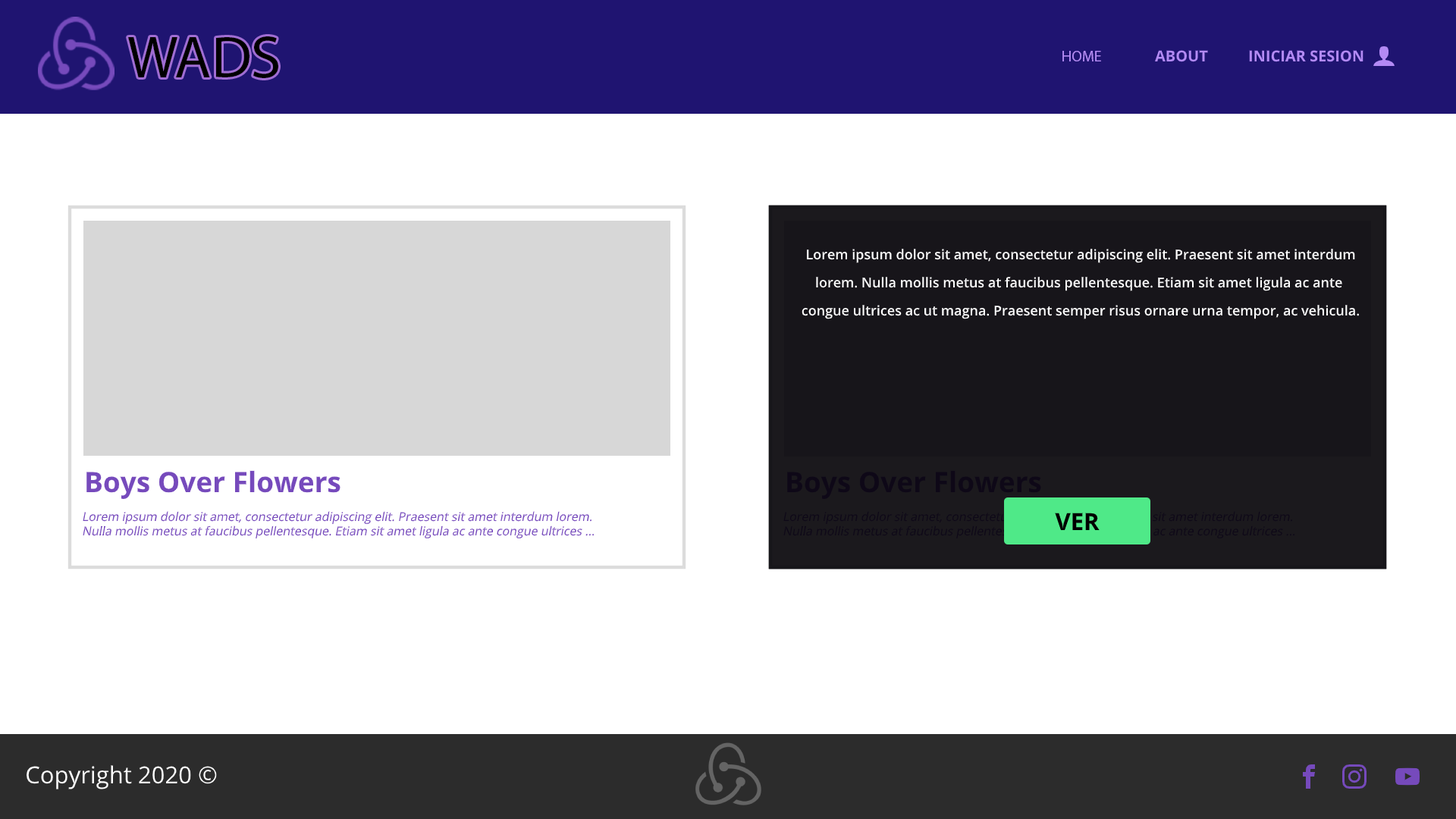
<style>
.page{position:relative;width:1456px;height:819px;background:#ffffff}
.page>*{position:absolute;margin:0}
.t1{font:59.9px "MyriadPro-Regular";color:#000000}
.t2{font:15.2px "MyriadPro-Regular";color:#b38af4}
.t3{font:15.2px "OpenSans-Bold";color:#b38af4}
.t4{font:13.6px/28.1px "OpenSans-Semibold";color:#ffffff}
.t5{font:28.1px "OpenSans-Bold";color:#764abc}
.t6{font:28.1px "OpenSans-Bold";color:#0e0817}
.t7{font:12.1px "OpenSans-Regular";color:#764abc;font-style:italic}
.t8{font:23.5px "OpenSans-Bold";letter-spacing:0.001em;color:#000000}
.t9{font:23.5px "OpenSans-Regular";letter-spacing:0.001em;color:#ffffff}
</style>
<div class="page">
<p class="t1" style="left:128px;top:36px;width:150px;height:42px">WADS</p>
<p class="t2" style="left:1062px;top:51px;width:39px;height:10px">HOME</p>
<p class="t3" style="left:1155px;top:50px;width:53px;height:12px">ABOUT</p>
<p class="t3" style="left:1249px;top:50px;width:114px;height:12px">INICIAR SESION</p>
<p class="t4" style="left:802px;top:249px;width:557px;height:70px;text-align:center">Lorem ipsum dolor sit amet, consectetur adipiscing elit. Praesent sit amet interdum<br>lorem. Nulla mollis metus at faucibus pellentesque. Etiam sit amet ligula ac ante <br>congue ultrices ac ut magna. Praesent semper risus ornare urna tempor, ac vehicula.</p>
<p class="t4" style="left:802px;top:249px;width:557px;height:70px;text-align:center">Lorem ipsum dolor sit amet, consectetur adipiscing elit. Praesent sit amet interdum<br>lorem. Nulla mollis metus at faucibus pellentesque. Etiam sit amet ligula ac ante <br>congue ultrices ac ut magna. Praesent semper risus ornare urna tempor, ac vehicula.</p>
<p class="t5" style="left:86px;top:470px;width:254px;height:29px">Boys Over Flowers</p>
<p class="t6" style="left:787px;top:470px;width:254px;height:29px">Boys Over Flowers</p>
<p class="t7" style="left:83px;top:511px;width:511px;height:27px">Lorem ipsum dolor sit amet, consectetur adipiscing elit. Praesent sit amet interdum lorem. <br>Nulla mollis metus at faucibus pellentesque. Etiam sit amet ligula ac ante congue ultrices ...</p>
<p class="t8" style="left:1055px;top:513px;width:45px;height:17px">VER</p>
<p class="t8" style="left:1055px;top:513px;width:45px;height:17px">VER</p>
<p class="t9" style="left:27px;top:765px;width:190px;height:24px">Copyright 2020 ©</p>
</div>
